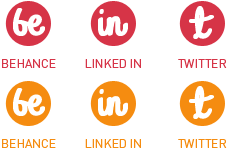
<style>
.page{position:relative;width:232px;height:151px;background:#ffffff}
.page>*{position:absolute;margin:0}
.t1{font:12px "DIN-Regular";color:#d63447}
.t2{font:12px "DIN-Regular";color:#f58c10}
</style>
<div class="page">
<p class="t1" style="left:2px;top:59px;width:54px;height:9px">BEHANCE</p>
<p class="t1" style="left:85px;top:59px;width:56px;height:9px">LINKED IN</p>
<p class="t1" style="left:178px;top:59px;width:49px;height:9px">TWITTER</p>
<p class="t2" style="left:2px;top:139px;width:54px;height:9px">BEHANCE</p>
<p class="t2" style="left:85px;top:139px;width:56px;height:9px">LINKED IN</p>
<p class="t2" style="left:178px;top:139px;width:49px;height:9px">TWITTER</p>
</div>
